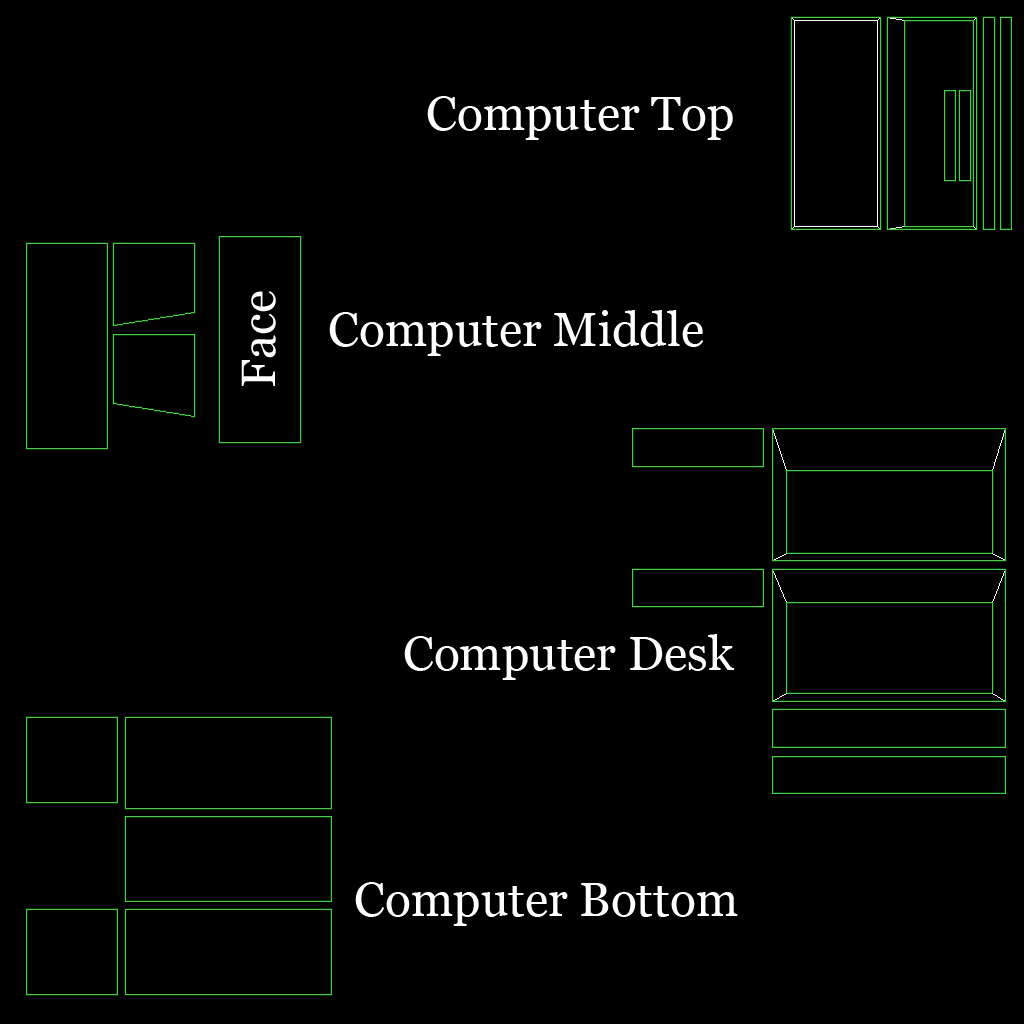
<style>
.page{position:relative;width:1024px;height:1024px;background:#000000}
.page>*{position:absolute;margin:0}
.t1{font:48px "Georgia";color:#ffffff}
</style>
<div class="page">
<p class="t1" style="left:427px;top:96px;width:306px;height:44px">Computer Top</p>
<p class="t1" style="left:241px;top:291px;width:35px;height:95px;rotate:-90deg">Face</p>
<p class="t1" style="left:329px;top:310px;width:375px;height:46px">Computer Middle</p>
<p class="t1" style="left:404px;top:634px;width:331px;height:46px">Computer Desk</p>
<p class="t1" style="left:355px;top:882px;width:383px;height:44px">Computer Bottom</p>
</div>
